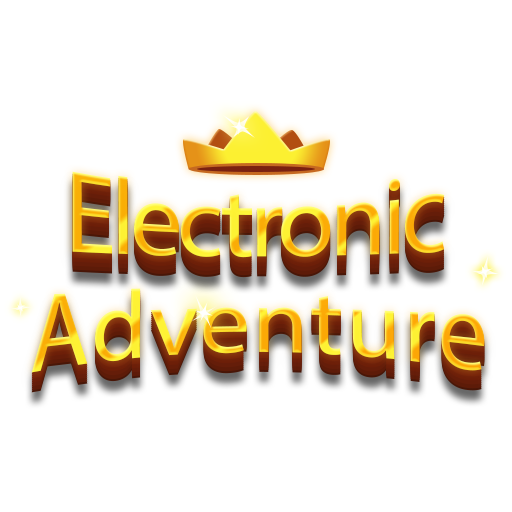
<style>
.page{position:relative;width:512px;height:512px;background:#ffffff}
.page>*{position:absolute;margin:0}
.t1{font:119.8px "MyriadPro-Regular";letter-spacing:-0.05em;scale:0.87 1}
.t2{font:115px "MyriadPro-Regular";letter-spacing:0.025em;scale:0.87 1}
</style>
<div class="page">
<p class="t1" style="left:72px;top:171px;width:373px;height:87px">Electronic</p>
<p class="t2" style="left:31px;top:288px;width:454px;height:85px">Adventure</p>
</div>
